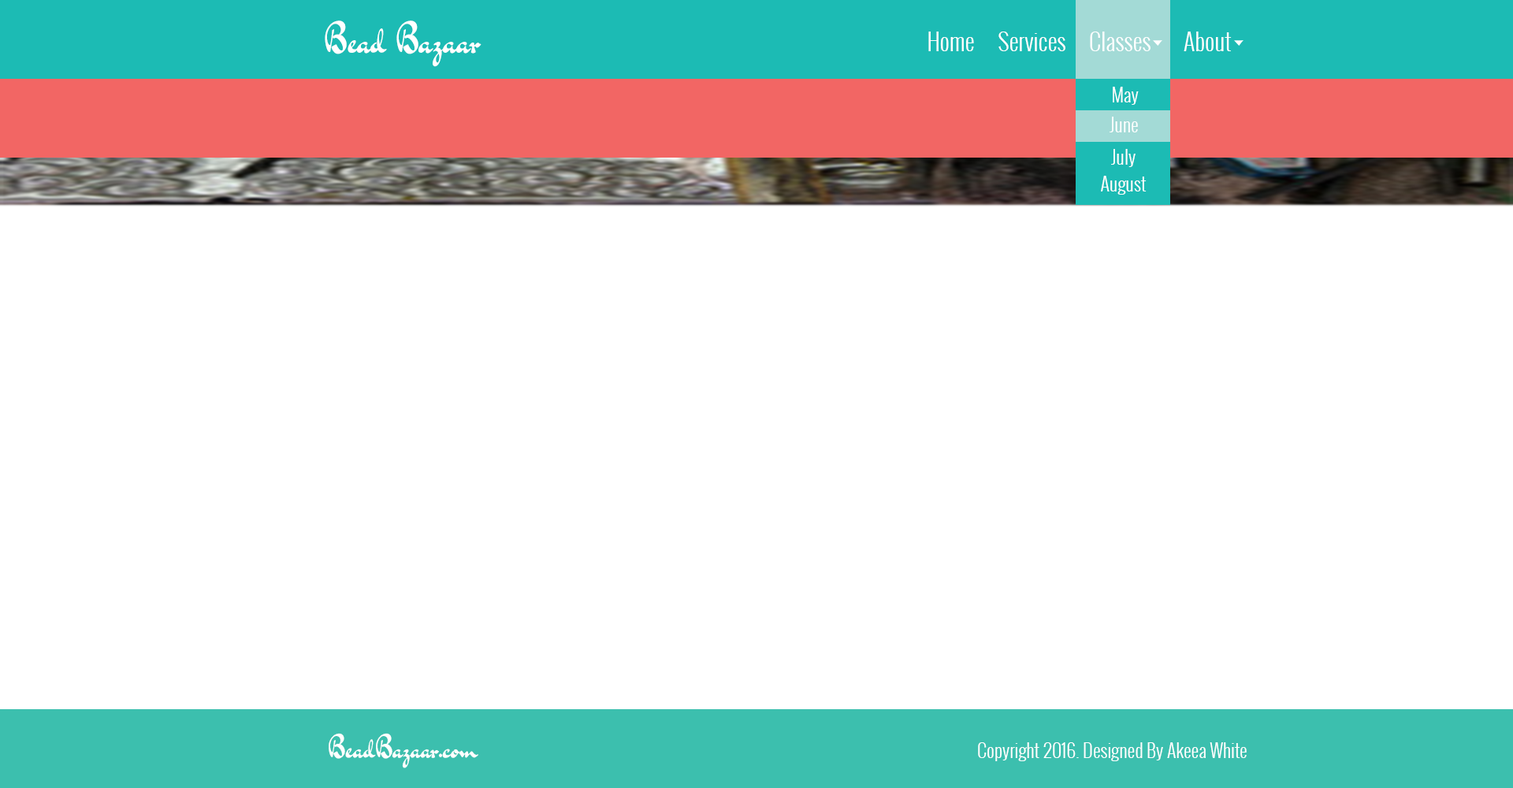
<style>
.page{position:relative;width:1513px;height:788px;background:#ffffff}
.page>*{position:absolute;margin:0}
.t1{font:37.8px "DrSugiyama-Regular";color:#ffffff}
.t2{font:23.6px "Oswald-Light";color:#ffffff}
.t3{font:28.4px "Oswald-Regular";color:#ffffff}
.t4{font:18.9px "Oswald-Light";color:#ffffff}
.t5{font:28.4px "DrSugiyama-Regular";color:#ffffff}
</style>
<div class="page">
<p class="t1" style="left:325px;top:20px;width:157px;height:47px">Bead Bazaar</p>
<p class="t2" style="left:928px;top:32px;width:304px;height:19px"><span class="t3">  </span>Home     Services     Classes       About</p>
<p class="t4" style="left:1113px;top:87px;width:26px;height:18px">May</p>
<p class="t4" style="left:1110px;top:117px;width:28px;height:15px">June</p>
<p class="t4" style="left:1111px;top:149px;width:25px;height:18px">July</p>
<p class="t4" style="left:1101px;top:176px;width:46px;height:19px">August</p>
<p class="t5" style="left:329px;top:733px;width:149px;height:35px">BeadBazaar.com</p>
<p class="t4" style="left:978px;top:742px;width:269px;height:19px">Copyright 2016. Designed By Akeea White</p>
</div>
